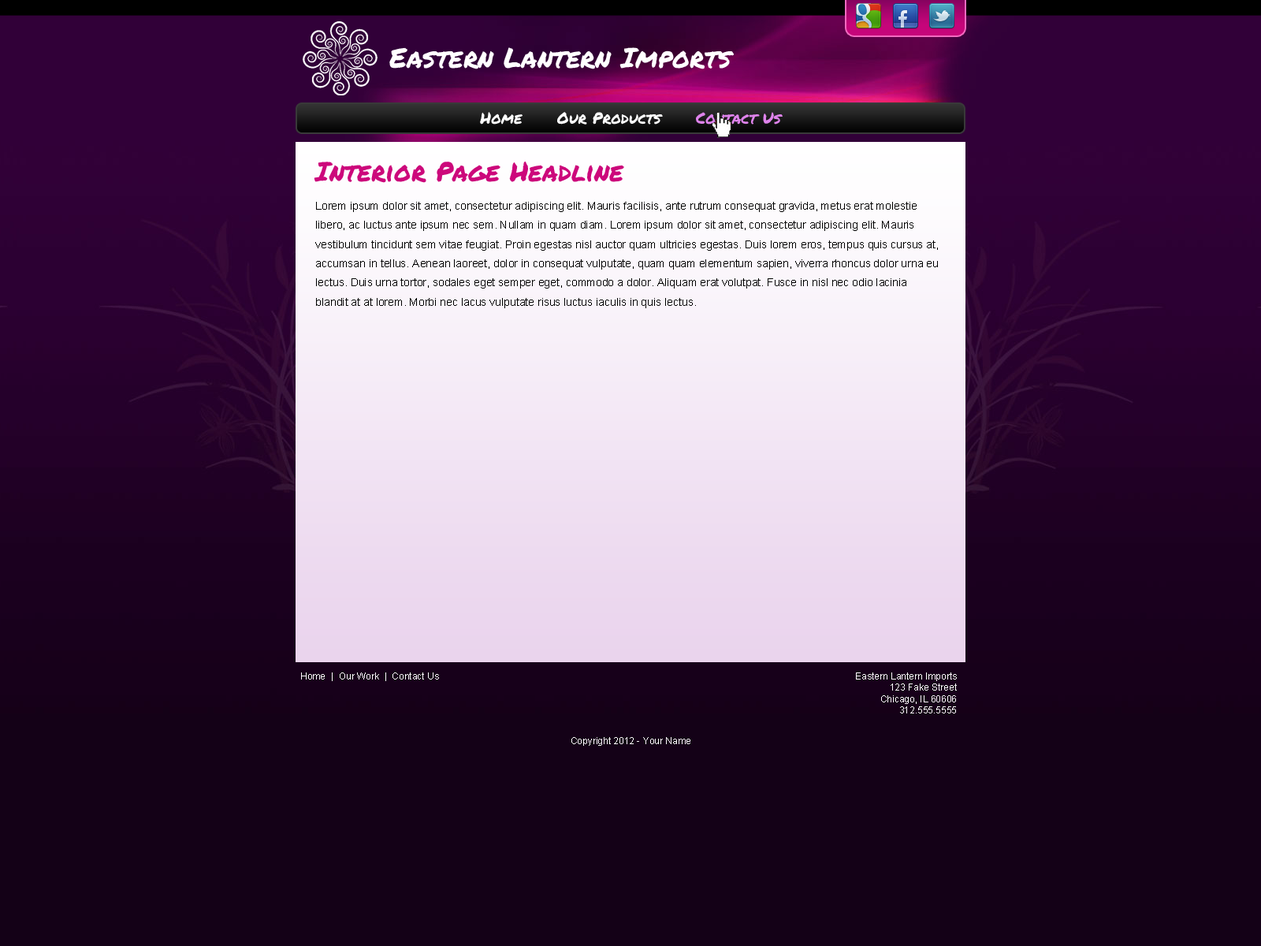
<style>
.page{position:relative;width:1261px;height:946px;background:#140117}
.page>*{position:absolute;margin:0}
.t1{font:27.6px "PermanentMarker";color:#ffffff}
.t2{font:15.8px "PermanentMarker";color:#ffffff}
.t3{font:15.8px "PermanentMarker";color:#de83eb}
.t4{font:26.8px "PermanentMarker";color:#cc087b}
.t5{font:11px/19.2px "ArialMT";color:#000000}
.t6{font:9.5px "ArialMT";color:#ffffff}
.t7{font:9.5px/11.3px "ArialMT";color:#ffffff}
</style>
<div class="page">
<p class="t1" style="left:389px;top:47px;width:345px;height:22px">Eastern Lantern Imports</p>
<p class="t2" style="left:480px;top:112px;width:303px;height:13px">Home      Our Products      <span class="t3">Contact Us</span></p>
<p class="t4" style="left:314px;top:161px;width:310px;height:22px">Interior Page Headline</p>
<p class="t5" style="left:315px;top:202px;width:623px;height:106px">Lorem ipsum dolor sit amet, consectetur adipiscing elit. Mauris facilisis, ante rutrum consequat gravida, metus erat molestie libero, ac luctus ante ipsum nec sem. Nullam in quam diam. Lorem ipsum dolor sit amet, consectetur adipiscing elit. Mauris vestibulum tincidunt sem vitae feugiat. Proin egestas nisl auctor quam ultricies egestas. Duis lorem eros, tempus quis cursus at, accumsan in tellus. Aenean laoreet, dolor in consequat vulputate, quam quam elementum sapien, viverra rhoncus dolor urna eu lectus. Duis urna tortor, sodales eget semper eget, commodo a dolor. Aliquam erat volutpat. Fusce in nisl nec odio lacinia blandit at at lorem. Morbi nec lacus vulputate risus luctus iaculis in quis lectus.</p>
<p class="t6" style="left:301px;top:672px;width:138px;height:9px">Home  |  Our Work  |  Contact Us</p>
<p class="t7" style="left:856px;top:672px;width:101px;height:41px;text-align:right">Eastern Lantern Imports<br>123 Fake Street<br>Chicago, IL 60606<br>312.555.5555</p>
<p class="t6" style="left:571px;top:737px;width:119px;height:9px">Copyright 2012 - Your Name</p>
</div>
